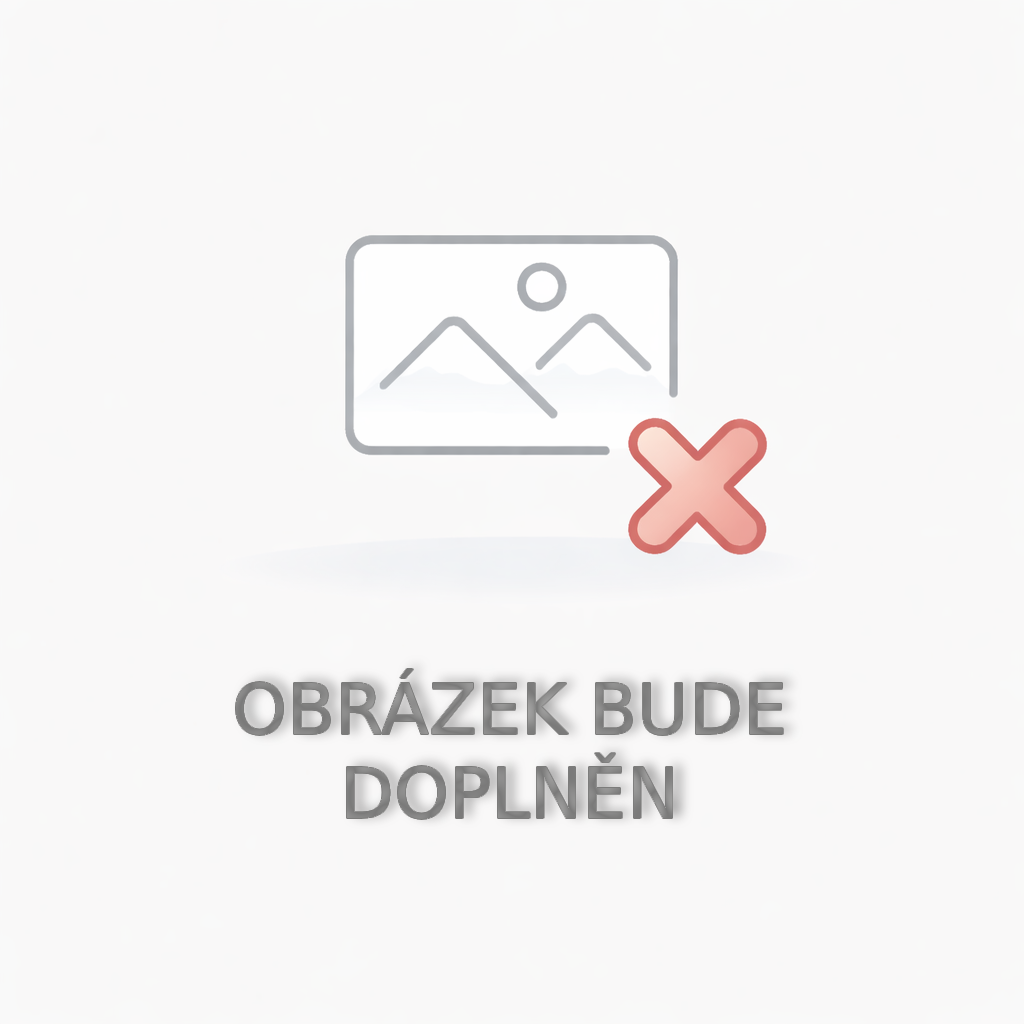
<style>
.page{position:relative;width:1024px;height:1024px;background:#f9f8f8}
.page>*{position:absolute;margin:0}
.t1{font:70px "DejaVuSans";color:#888887}
</style>
<div class="page">
<p class="t1" style="left:235px;top:669px;width:548px;height:150px;text-align:center;opacity:0.7">OBRÁZEK BUDE<br>DOPLNĚN</p>
</div>
